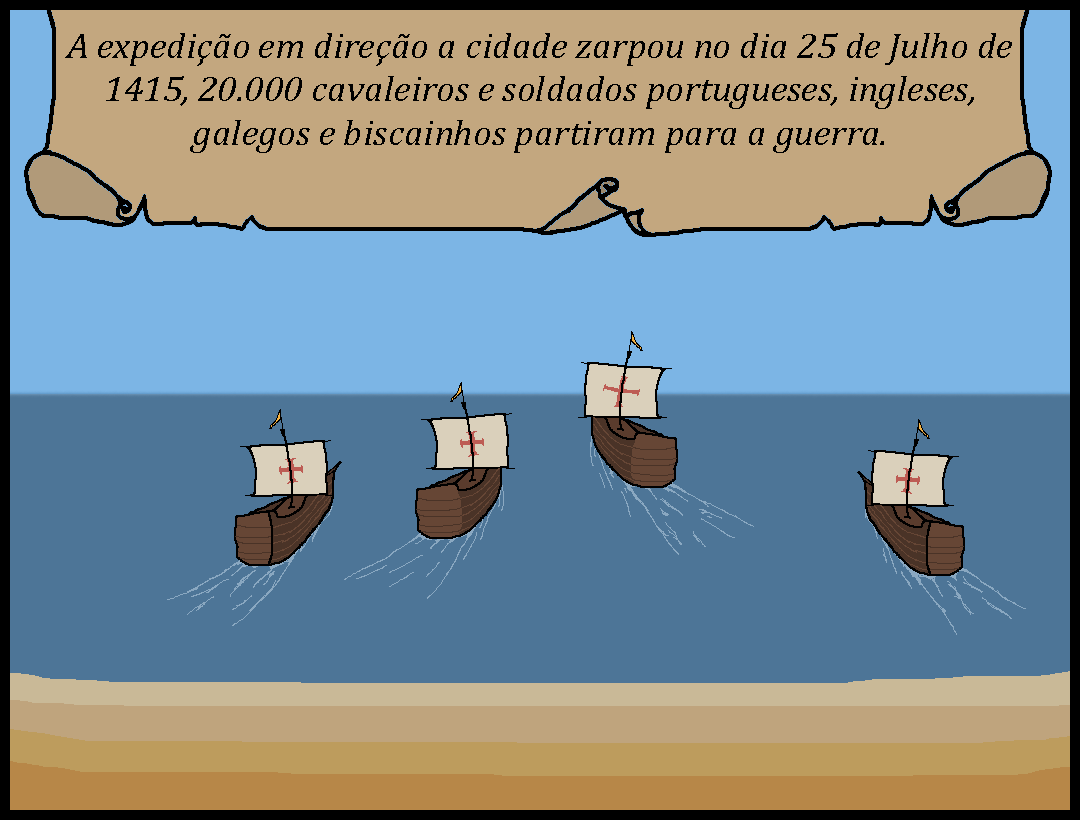
<style>
.page{position:relative;width:1080px;height:820px;background:#4d7597}
.page>*{position:absolute;margin:0}
.t1{font:36px "Cambria-Italic";color:#000000;scale:1.03 1}
</style>
<div class="page">
<p class="t1" style="left:65px;top:33px;width:947px;height:120px;text-align:center">A expedição em direção a cidade zarpou no dia 25 de Julho de 1415, 20.000 cavaleiros e soldados portugueses, ingleses, galegos e biscainhos partiram para a guerra.</p>
</div>
